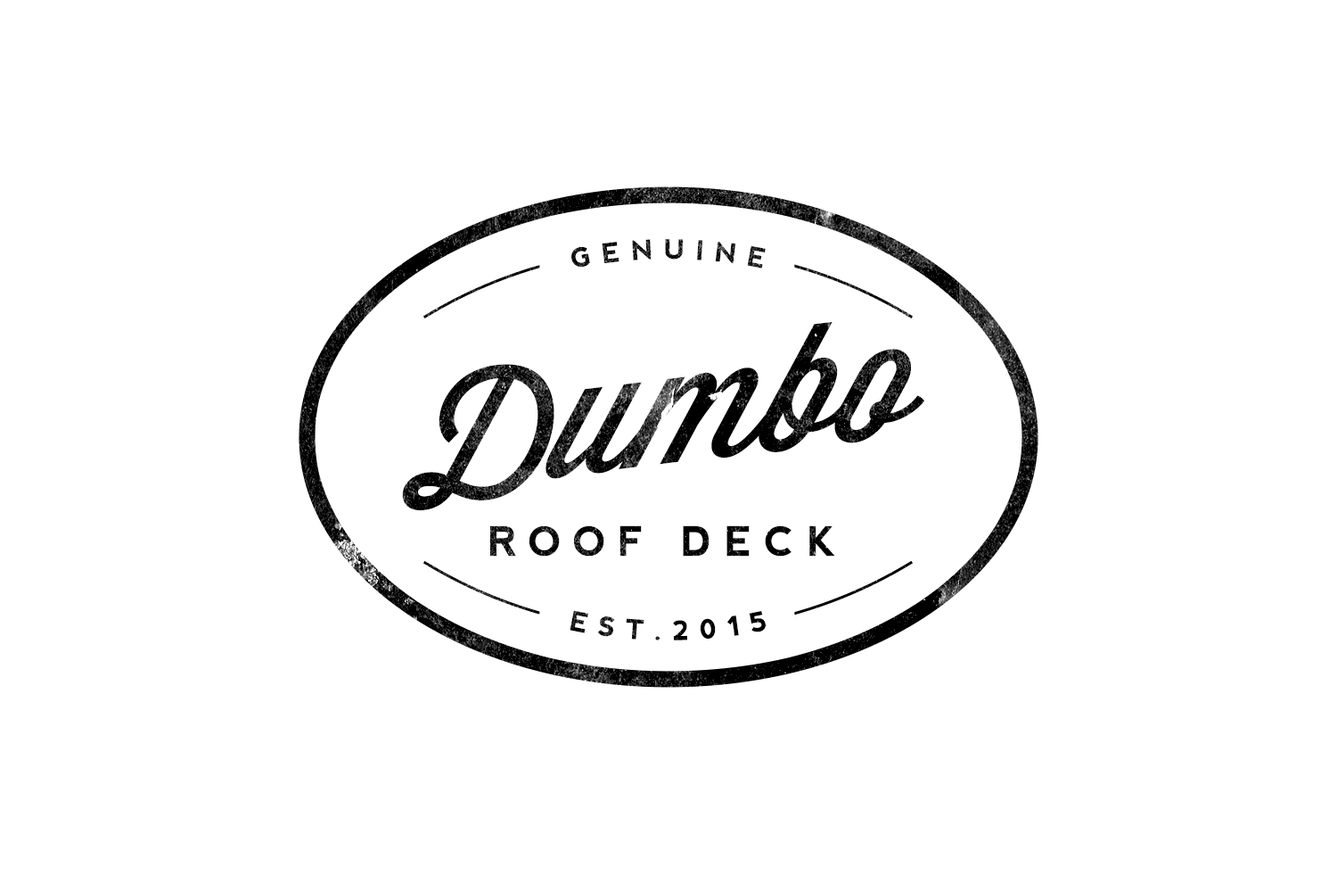
<style>
.page{position:relative;width:1337px;height:892px;background:#ffffff}
.page>*{position:absolute;margin:0}
.t1{font:26.7px "nevis-Bold";letter-spacing:0.4em;text-transform:uppercase}
.t2{font:167.7px "Wisdom-Script"}
.t3{font:40.5px "nevis-Bold";letter-spacing:0.3em;color:#000000;text-transform:uppercase}
.t4{font:26.7px "nevis-Bold";letter-spacing:0.4em;color:#000000;text-transform:uppercase}
</style>
<div class="page">
<p class="t1" style="left:572px;top:239px;width:194px;height:29px">genuine</p>
<p class="t2" style="left:402px;top:322px;width:523px;height:189px;rotate:-7deg">Dumbo</p>
<p class="t3" style="left:490px;top:525px;width:345px;height:31px">Roof deck</p>
<p class="t4" style="left:570px;top:610px;width:196px;height:30px">EST.2015</p>
</div>
